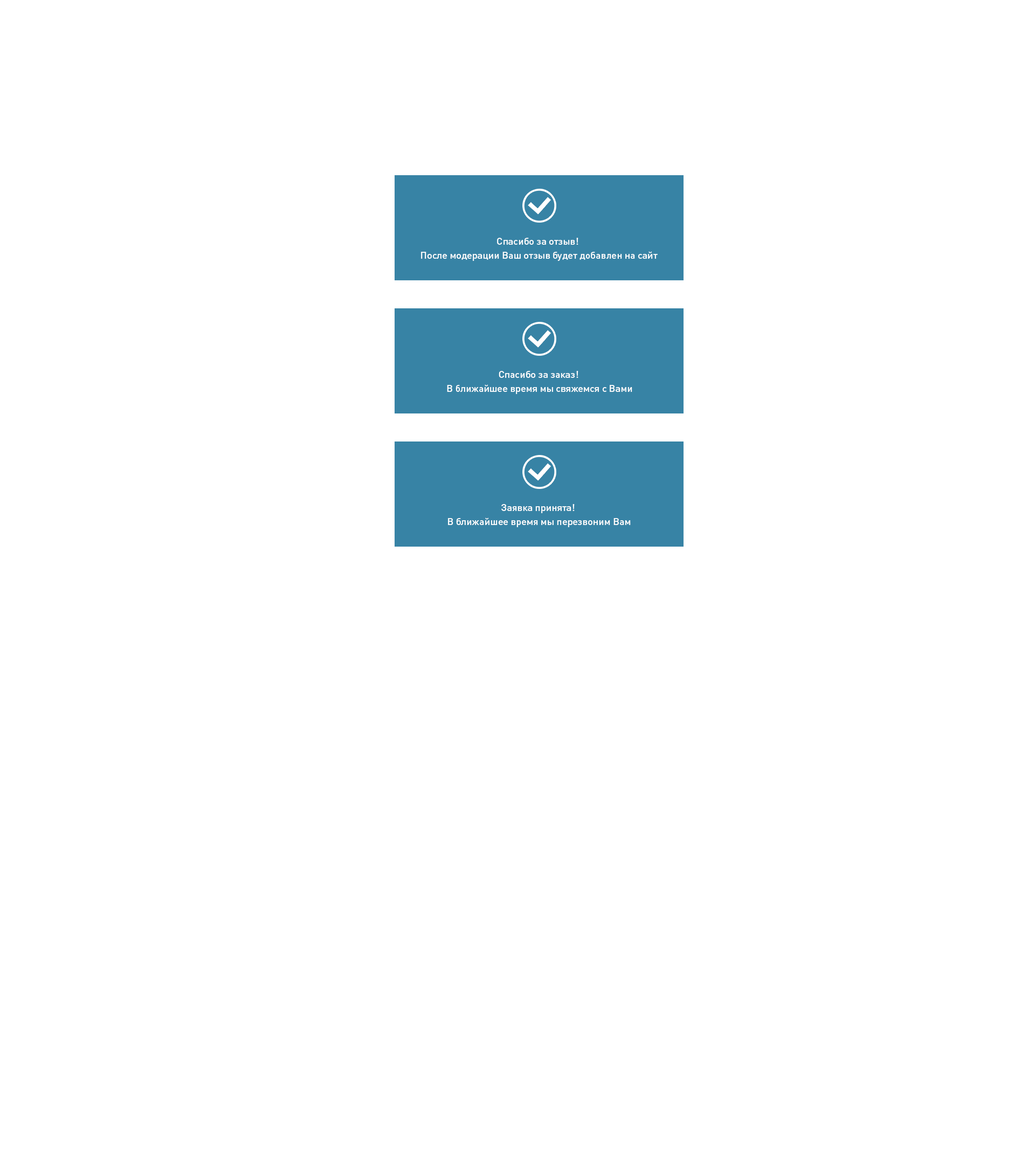
<style>
.page{position:relative;width:1035px;height:1152px;background:#ffffff}
.page>*{position:absolute;margin:0}
.t1{font:9.7px/14px "DINPro-Medium";color:#ffffff}
</style>
<div class="page">
<p class="t1" style="left:421px;top:238px;width:237px;height:23px;text-align:center">Спасибо за отзыв! <br>После модерации Ваш отзыв будет добавлен на сайт</p>
<p class="t1" style="left:447px;top:371px;width:185px;height:23px;text-align:center">Спасибо за заказ! <br>В ближайшее время мы свяжемся с Вами</p>
<p class="t1" style="left:448px;top:504px;width:183px;height:23px;text-align:center">Заявка принята! <br>В ближайшее время мы перезвоним Вам</p>
</div>
